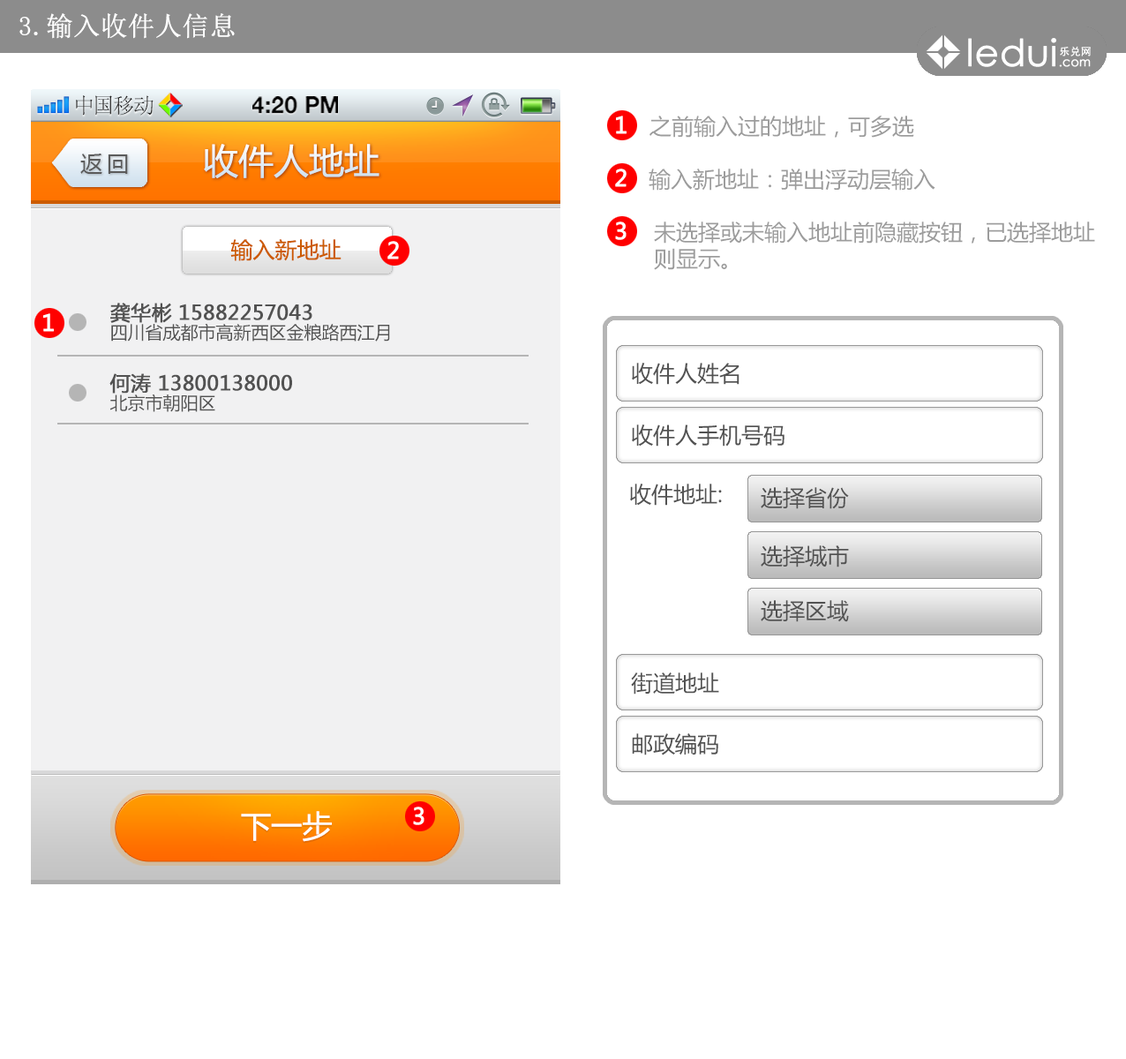
<style>
.page{position:relative;width:1126px;height:1059px;background:#ffffff}
.page>*{position:absolute;margin:0}
.t1{font:26.5px "SimSun";color:#ffffff;font-weight:bold}
.t2{font:21.5px "SimSun";color:#414141}
.t3{font:23.1px "HelveticaNeue-Bold";color:#000000;text-transform:uppercase}
.t4{font:22.1px "MicrosoftYaHei";color:#9c9c9c}
.t5{font:35.3px "MicrosoftYaHei";color:#e8f0f7}
.t6{font:22.1px "MicrosoftYaHei";letter-spacing:0.2em;color:#5b5b5b}
.t7{font:22.1px "MicrosoftYaHei";color:#cc5b00}
.t8{font:17.6px/21.2px "MicrosoftYaHei";color:#525252}
.t9{font:20px/21.2px "MicrosoftYaHei";color:#525252;font-weight:bold}
.t10{font:22.1px "MicrosoftYaHei";color:#525252}
.t11{font:30.6px "MicrosoftYaHei";color:#ffffff}
</style>
<div class="page">
<p class="t1" style="left:19px;top:13px;width:216px;height:26px">3.输入收件人信息</p>
<p class="t2" style="left:76px;top:95px;width:78px;height:21px">中国移动</p>
<p class="t3" style="left:252px;top:96px;width:86px;height:18px">4:20 PM</p>
<p class="t4" style="left:649px;top:116px;width:265px;height:22px">之前输入过的地址，可多选</p>
<p class="t5" style="left:204px;top:144px;width:175px;height:34px">收件人地址</p>
<p class="t6" style="left:80px;top:154px;width:48px;height:20px">返回</p>
<p class="t4" style="left:649px;top:169px;width:286px;height:22px">输入新地址：弹出浮动层输入</p>
<p class="t4" style="left:654px;top:222px;width:441px;height:48px">未选择或未输入地址前隐藏按钮，已选择地址<br>则显示。</p>
<p class="t7" style="left:230px;top:239px;width:112px;height:22px">输入新地址</p>
<p class="t8" style="left:110px;top:303px;width:280px;height:39px"><span class="t9">龚华彬 15882257043<br></span>四川省成都市高新西区金粮路西江月</p>
<p class="t10" style="left:632px;top:363px;width:108px;height:22px">收件人姓名</p>
<p class="t9" style="left:109px;top:373px;width:183px;height:39px">何涛 13800138000<br><span class="t8">北京市朝阳区</span></p>
<p class="t10" style="left:632px;top:424px;width:153px;height:23px">收件人手机号码</p>
<p class="t10" style="left:630px;top:484px;width:92px;height:22px">收件地址:</p>
<p class="t10" style="left:761px;top:487px;width:88px;height:22px">选择省份</p>
<p class="t10" style="left:761px;top:545px;width:88px;height:22px">选择城市</p>
<p class="t10" style="left:761px;top:600px;width:88px;height:22px">选择区域</p>
<p class="t10" style="left:631px;top:672px;width:88px;height:23px">街道地址</p>
<p class="t10" style="left:632px;top:733px;width:86px;height:22px">邮政编码</p>
<p class="t11" style="left:241px;top:811px;width:91px;height:31px">下一步</p>
</div>
